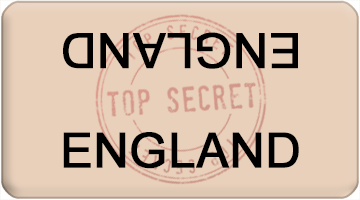
<style>
.page{position:relative;width:360px;height:200px;background:#e8d0bb}
.page>*{position:absolute;margin:0}
.t1{font:48px "ArialMT";color:#000000;font-weight:bold}
</style>
<div class="page">
<p class="t1" style="left:63px;top:32px;width:235px;height:37px;rotate:180deg">ENGLAND</p>
<p class="t1" style="left:63px;top:132px;width:236px;height:37px">ENGLAND</p>
</div>
